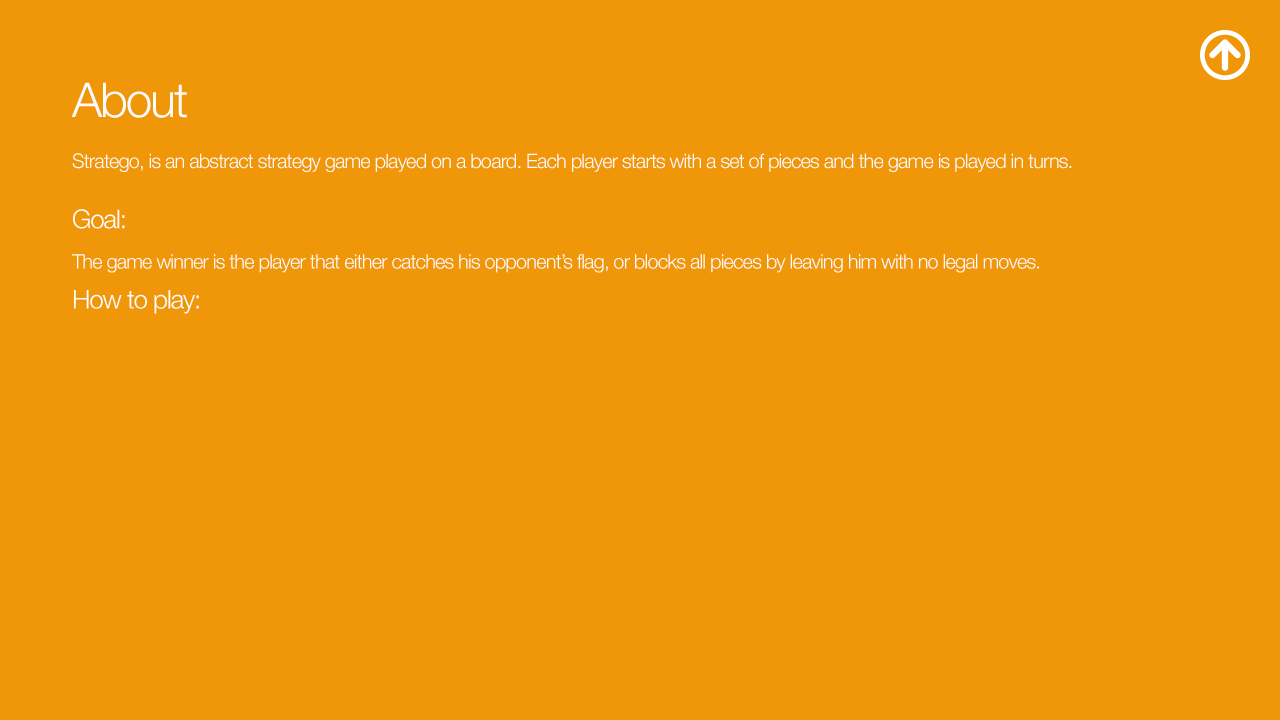
<style>
.page{position:relative;width:1280px;height:720px;background:#f09609}
.page>*{position:absolute;margin:0}
.t1{font:48px "HelveticaNeue-Light";letter-spacing:-0.04em;color:#fffbfb}
.t2{font:20px/20.1px "HelveticaNeue-Light";letter-spacing:-0.04em;color:#fffbfb}
.t3{font:26px/20.1px "HelveticaNeue-Light";letter-spacing:-0.04em;color:#fffbfb}
</style>
<div class="page">
<p class="t1" style="left:71px;top:82px;width:116px;height:36px">About</p>
<p class="t2" style="left:72px;top:153px;width:1000px;height:161px">Stratego, is an abstract strategy game played on a board. Each player starts with a set of pieces and the game is played in turns.<br><br><br><span class="t3">Goal:<br></span><br>The game winner is the player that either catches his opponent’s flag, or blocks all pieces by leaving him with no legal moves.<br><br><span class="t3">How to play:</span></p>
</div>
